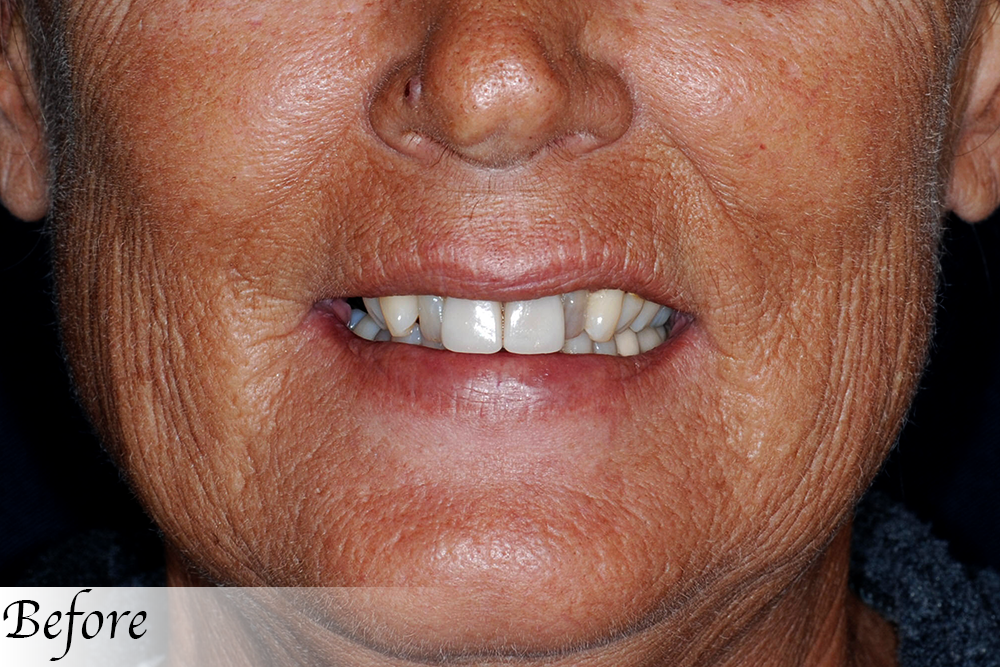
<style>
.page{position:relative;width:1000px;height:667px}
.page>*{position:absolute;margin:0}
.t1{font:97px "Apple-Chancery";color:#000000}
</style>
<div class="page">
<p class="t1" style="left:3px;top:589px;width:144px;height:72px">Before</p>
</div>
